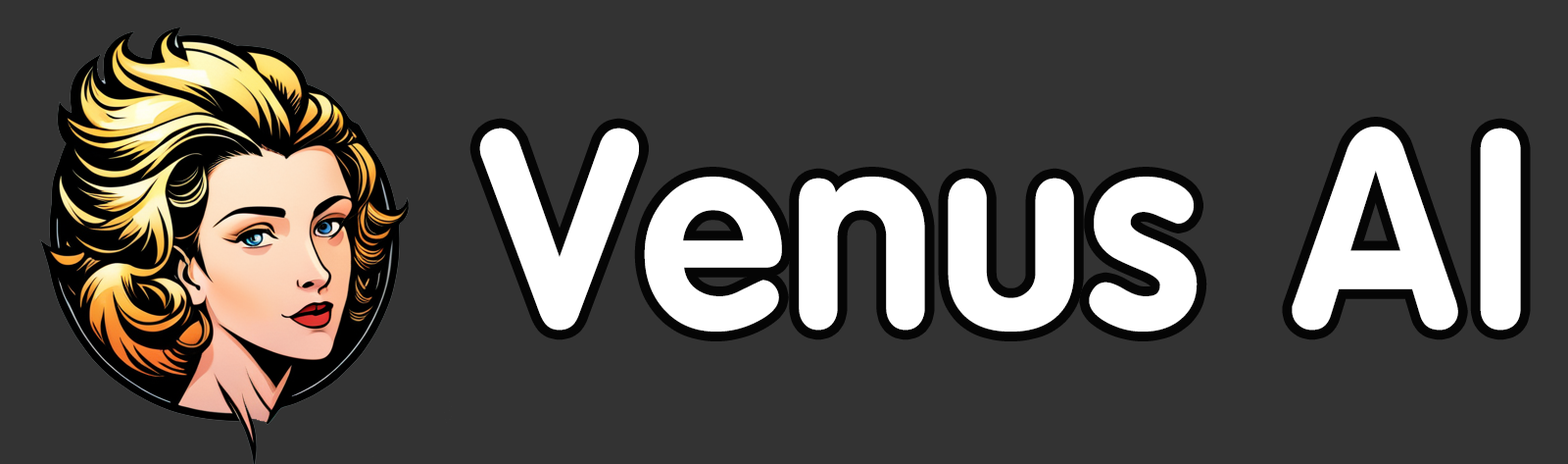
<style>
.page{position:relative;width:1568px;height:464px;background:#333333}
.page>*{position:absolute;margin:0}
.t1{font:277.8px "Vinhan-Bold";color:#ffffff;scale:0.95 1}
</style>
<div class="page">
<p class="t1" style="left:479px;top:126px;width:1042px;height:205px">Venus AI</p>
</div>
